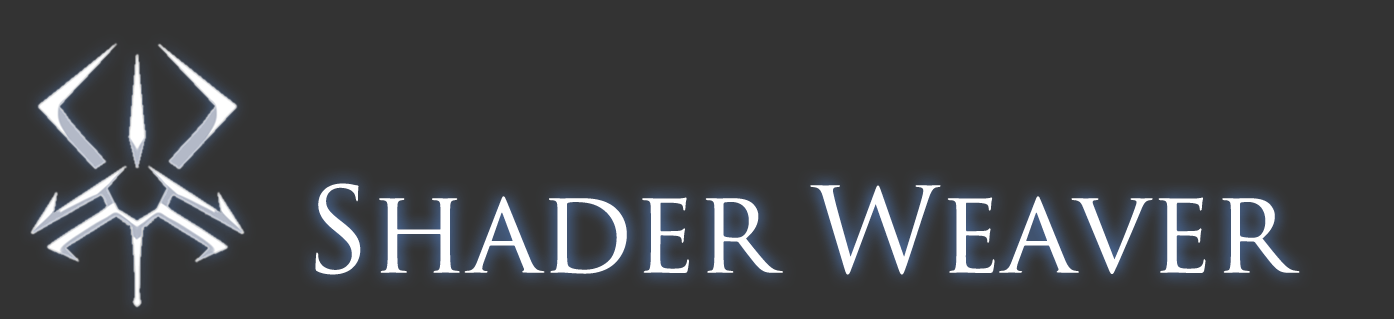
<style>
.page{position:relative;width:1394px;height:319px;background:#333333}
.page>*{position:absolute;margin:0}
.t1{font:115.6px "TrajanPro-Regular";color:#ffffff}
</style>
<div class="page">
<p class="t1" style="left:315px;top:183px;width:985px;height:92px">Shader Weaver</p>
</div>
